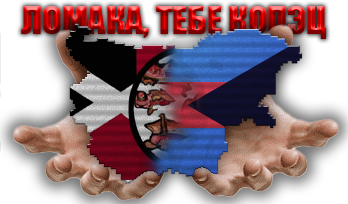
<style>
.page{position:relative;width:348px;height:204px}
.page>*{position:absolute;margin:0}
.t1{font:36px "Impact"}
</style>
<div class="page">
<p class="t1" style="left:21px;top:6px;width:305px;height:33px">ЛОМАКА, ТЕБЕ КОПЭЦ</p>
</div>
